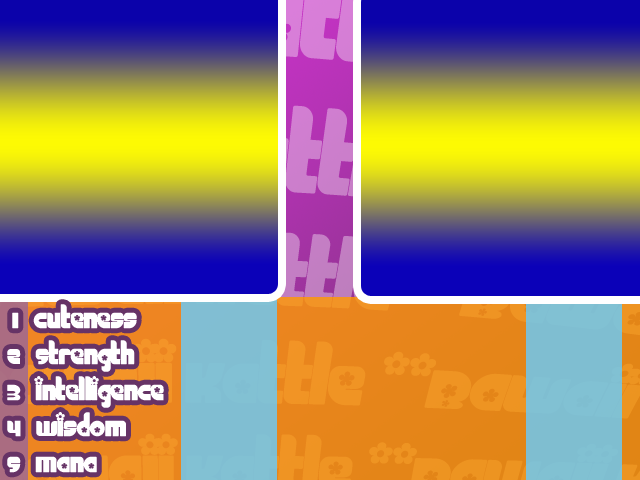
<style>
.page{position:relative;width:640px;height:480px}
.page>*{position:absolute;margin:0}
.t1{font:30px "Chick";color:#ffffff}
</style>
<div class="page">
<p class="t1" style="left:7px;top:304px;width:157px;height:169px">1   cuteness<br>2   Strength<br>3   intelligence<br>4   Wisdom<br>5   Mana</p>
</div>
